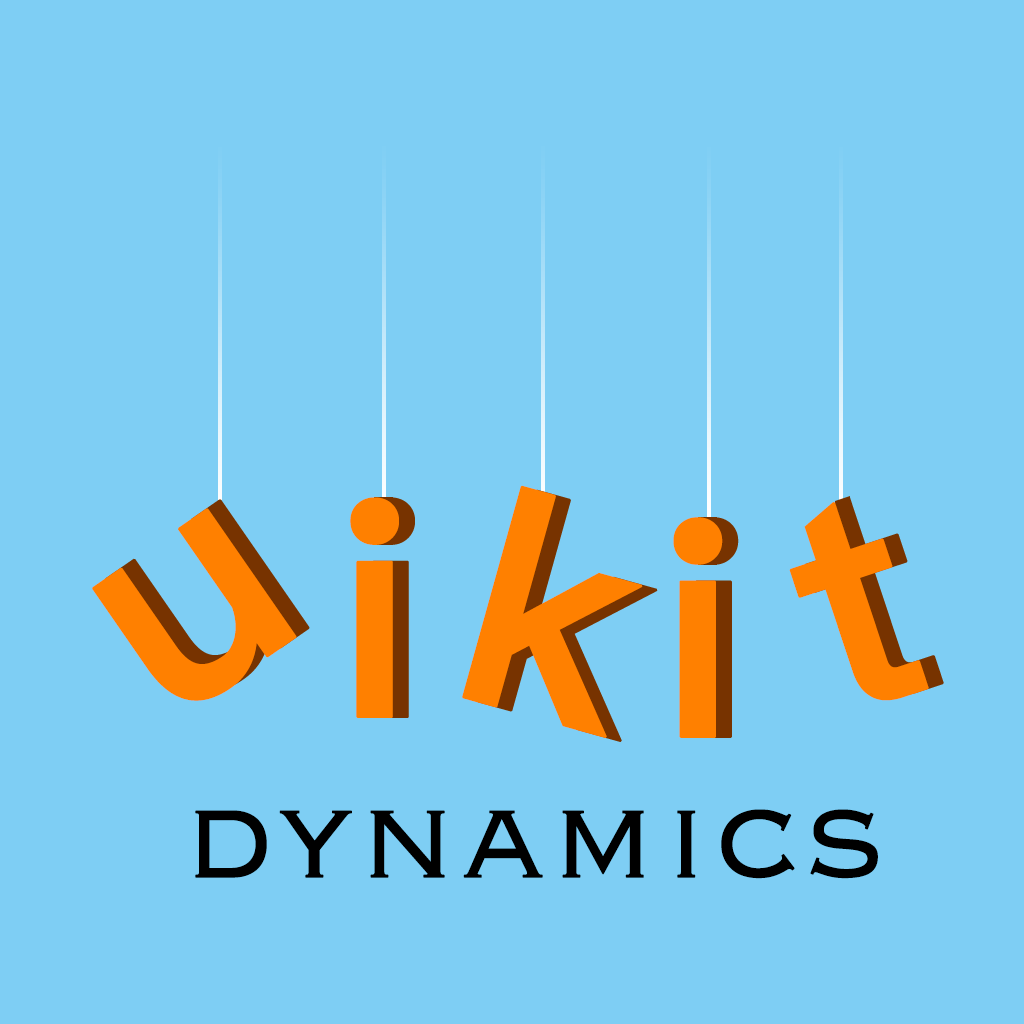
<style>
.page{position:relative;width:1024px;height:1024px;background:#7ecef4}
.page>*{position:absolute;margin:0}
.t1{font:300px "PingFangSC-Semibold";color:#ff8000;font-weight:bold}
.t2{font:150px "Copperplate-Light";color:#000000;font-weight:bold}
</style>
<div class="page">
<p class="t1" style="left:462px;top:485px;width:181px;height:253px;rotate:16deg">k</p>
<p class="t1" style="left:350px;top:497px;width:49px;height:221px">i</p>
<p class="t1" style="left:92px;top:508px;width:205px;height:193px;rotate:-35deg">u</p>
<p class="t1" style="left:789px;top:502px;width:140px;height:199px;rotate:-18deg">t</p>
<p class="t1" style="left:673px;top:517px;width:50px;height:221px">i</p>
<p class="t2" style="left:195px;top:809px;width:683px;height:70px">dynamics</p>
</div>
